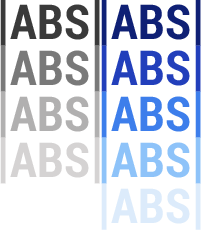
<style>
.page{position:relative;width:201px;height:230px;background:#ffffff}
.page>*{position:absolute;margin:0}
.t1{font:37px/4px "Bebas";color:#3b3b3b}
.t2{font:48px/7px "RobotoCondensed-Bold";color:#3b3b3b}
.t3{font:37px/4px "Bebas";color:#0f2075}
.t4{font:48px/7px "RobotoCondensed-Bold";color:#0f2075}
.t5{font:37px/4px "Bebas";color:#797979}
.t6{font:48px/7px "RobotoCondensed-Bold";color:#797979}
.t7{font:37px/4px "Bebas";color:#2340bb}
.t8{font:48px/7px "RobotoCondensed-Bold";color:#2340bb}
.t9{font:37px/4px "Bebas";color:#b2b0b0}
.t10{font:48px/7px "RobotoCondensed-Bold";color:#b2b0b0}
.t11{font:37px/4px "Bebas";color:#3e7feb}
.t12{font:48px/7px "RobotoCondensed-Bold";color:#3e7feb}
.t13{font:37px/4px "Bebas";color:#d6d3d3}
.t14{font:48px/7px "RobotoCondensed-Bold";color:#d6d3d3}
.t15{font:37px/4px "Bebas";color:#8fc3f9}
.t16{font:48px/7px "RobotoCondensed-Bold";color:#8fc3f9}
</style>
<div class="page">
<p class="t1" style="left:0px;top:0px;width:100px;height:46px;text-align:center"><span class="t2">ABS<br></span>|                         |</p>
<p class="t3" style="left:101px;top:0px;width:100px;height:46px;text-align:center"><span class="t4">ABS<br></span>|                         |</p>
<p class="t5" style="left:0px;top:45px;width:100px;height:47px;text-align:center"><span class="t6">ABS<br></span>|                         |</p>
<p class="t7" style="left:101px;top:45px;width:100px;height:47px;text-align:center"><span class="t8">ABS<br></span>|                         |</p>
<p class="t9" style="left:0px;top:91px;width:100px;height:47px;text-align:center"><span class="t10">ABS<br></span>|                         |</p>
<p class="t11" style="left:101px;top:91px;width:100px;height:47px;text-align:center"><span class="t12">ABS<br></span>|                         |</p>
<p class="t13" style="left:0px;top:137px;width:100px;height:47px;text-align:center"><span class="t14">ABS<br></span>|                         |</p>
<p class="t15" style="left:101px;top:137px;width:100px;height:47px;text-align:center"><span class="t16">ABS<br></span>|                         |</p>
</div>
